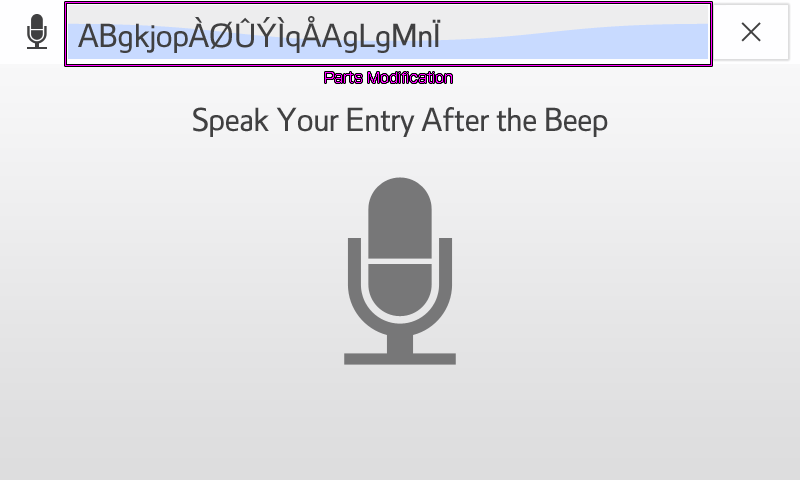
<style>
.page{position:relative;width:800px;height:480px}
.page>*{position:absolute;margin:0}
.t1{font:30px "Tfont1411_T1S";color:#404041}
.t2{font:14px "ShinGoPro-Regular";color:#ff00ff}
.t3{font:30px "Tfont1411_T1S";color:#404040}
</style>
<div class="page">
<p class="t1" style="left:78px;top:16px;width:363px;height:37px">ABgkjopÀØÛÝÌqÅAgLgMnÏ</p>
<p class="t2" style="left:325px;top:72px;width:127px;height:11px">Parts Modification</p>
<p class="t3" style="left:193px;top:107px;width:415px;height:30px">Speak Your Entry After the Beep</p>
</div>
